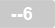
<style>
.page{position:relative;width:55px;height:28px;background:#c9c9c9}
.page>*{position:absolute;margin:0}
.t1{font:18.2px "Arial-BoldMT";color:#ffffff}
</style>
<div class="page">
<p class="t1" style="left:11px;top:7px;width:22px;height:13px">--6</p>
</div>
